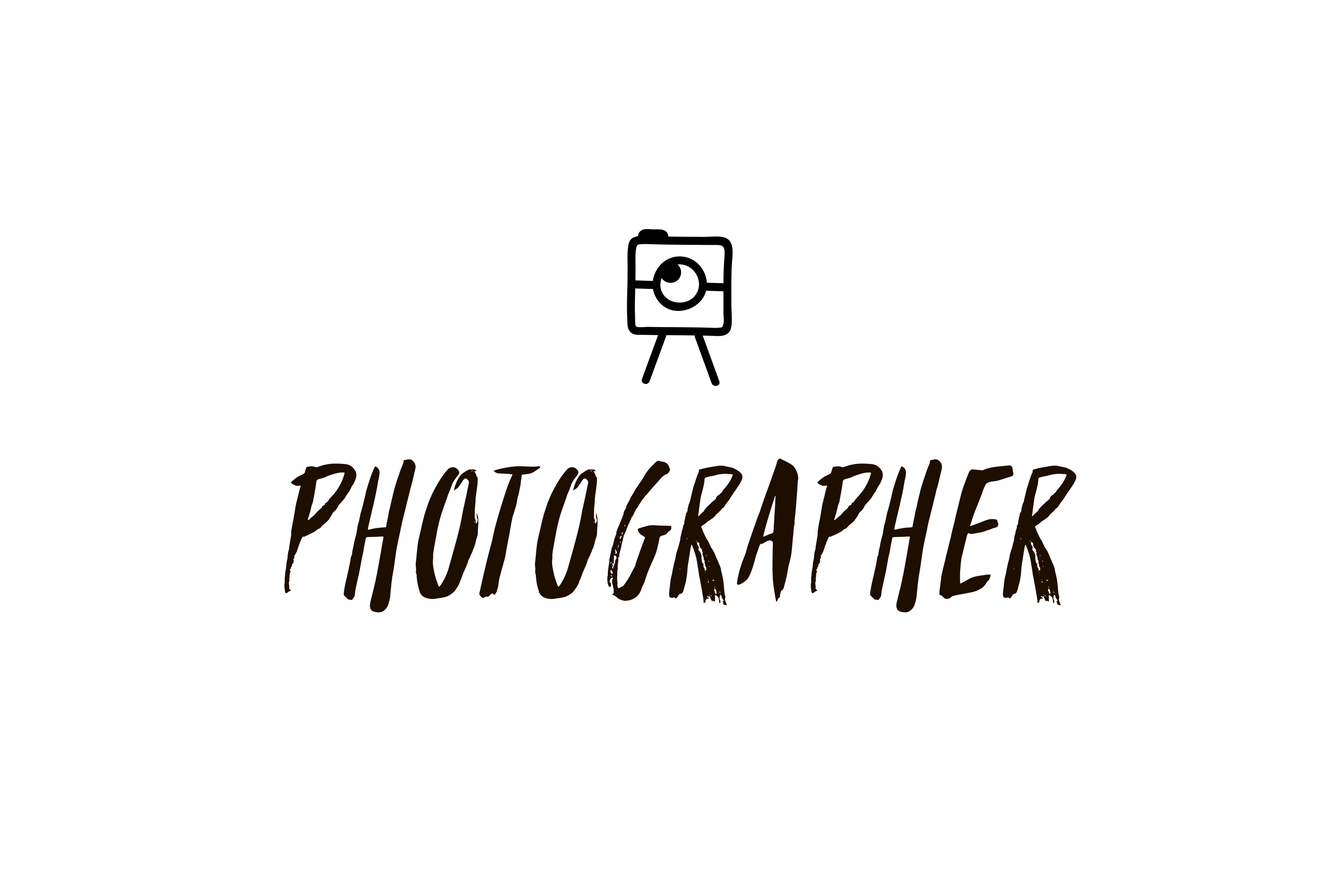
<style>
.page{position:relative;width:1339px;height:891px;background:#ffffff}
.page>*{position:absolute;margin:0}
.t1{font:180.3px "PARABOLA";letter-spacing:0.025em;color:#1e0e00}
.t2{font:180.3px "PARABOLA";letter-spacing:-0.1em;color:#1e0e00}
.t3{font:180.3px "PARABOLA";letter-spacing:0.05em;color:#1e0e00}
.t4{font:180.3px "PARABOLA";color:#1e0e00}
</style>
<div class="page">
<p class="t1" style="left:284px;top:458px;width:792px;height:154px"><span class="t2">P</span>HO<span class="t3">TO</span>GR<span class="t3">A</span><span class="t2">P</span><span class="t3">H</span><span class="t4">ER</span></p>
</div>
